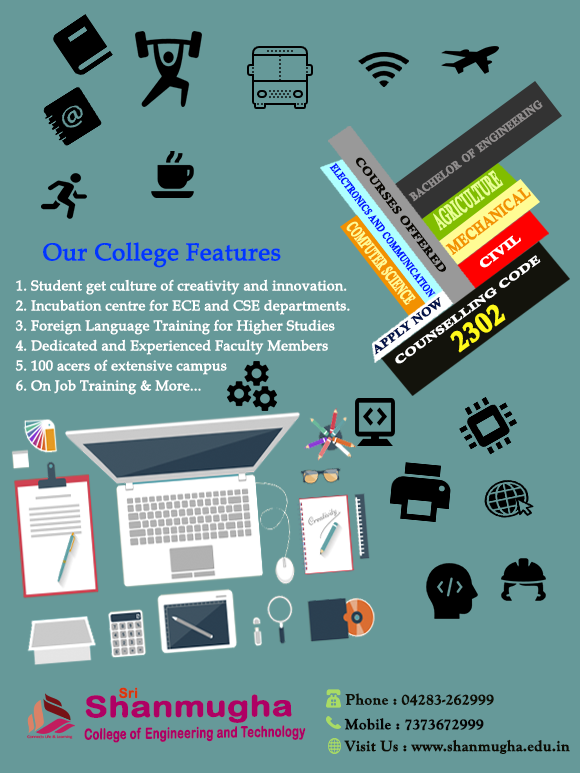
<style>
.page{position:relative;width:580px;height:773px;background:#669999}
.page>*{position:absolute;margin:0}
.t1{font:11.2px "CalisMTBol";color:#0b0803;font-weight:bold;scale:1.22 1}
.t2{font:10.6px "CalisMTBol";color:#0018ff;font-variant:small-caps;font-weight:bold;scale:0.75 1}
.t3{font:24.2px "CalisMTBol";color:#e9ff93;font-variant:small-caps;font-weight:bold;scale:0.4 1}
.t4{font:16.5px "CalisMTBol";color:#fffc94;font-variant:small-caps;font-weight:bold;scale:0.53 1}
.t5{font:24px "BookAntiqua";color:#0036ff;font-weight:bold}
.t6{font:17.9px "CalisMTBol";color:#ffffff;font-variant:small-caps;font-weight:bold;scale:1.27 1}
.t7{font:14px/20px "BookAntiqua";color:#ffffff;font-weight:bold}
.t8{font:27.3px "CalisMTBol";color:#fff91a;font-variant:small-caps;font-weight:bold}
.t9{font:13.7px "ArialRoundedMTBold";color:#dc360b;font-weight:bold}
.t10{font:29.2px "ArialRoundedMTBold";color:#ae0064;font-weight:bold;scale:1.19 1}
.t11{font:15.2px "GoudyOldStyleT-Bold";color:#0f1005;font-weight:bold}
.t12{font:15.1px "ArialRoundedMTBold";color:#ae0064;font-weight:bold;scale:0.73 1}
.t13{font:15.2px "GoudyOldStyleT-Bold";color:#050504;font-weight:bold}
.t14{font:15.2px "GoudyOldStyleT-Bold";color:#0d0e04;font-weight:bold}
</style>
<div class="page">
<p class="t1" style="left:356px;top:157px;width:90px;height:115px;rotate:53deg">COURSES OFFERED</p>
<p class="t2" style="left:329px;top:162px;width:107px;height:136px;rotate:53deg">ELECTRONICS AND COMMUNICATION</p>
<p class="t3" style="left:433px;top:170px;width:71px;height:61px;rotate:-36deg">AGRICULTURE</p>
<p class="t4" style="left:346px;top:221px;width:70px;height:84px;rotate:52deg">COMPUTER SCIENCE</p>
<p class="t5" style="left:43px;top:242px;width:238px;height:26px">Our College Features</p>
<p class="t6" style="left:480px;top:235px;width:41px;height:33px;rotate:-37deg">civil</p>
<p class="t7" style="left:15px;top:279px;width:335px;height:116px">1. Student get culture of creativity and innovation.<br>2. Incubation centre for ECE and CSE departments.<br>3. Foreign Language Training for Higher Studies <br>4. Dedicated and Experienced Faculty Members<br>5. 100 acers of extensive campus<br>6. On Job Training &amp; More...</p>
<p class="t8" style="left:450px;top:304px;width:56px;height:49px;rotate:-36deg">2302</p>
<p class="t9" style="left:119px;top:687px;width:19px;height:12px">Sri</p>
<p class="t10" style="left:85px;top:694px;width:207px;height:29px">Shanmugha</p>
<p class="t11" style="left:345px;top:693px;width:149px;height:13px">Phone : 04283-262999</p>
<p class="t12" style="left:84px;top:725px;width:222px;height:18px;rotate:-1deg">College of Engineering and Technology</p>
<p class="t13" style="left:344px;top:718px;width:140px;height:13px">Mobile : 7373672999</p>
<p class="t14" style="left:344px;top:739px;width:226px;height:15px">Visit Us : www.shanmugha.edu.in</p>
</div>
